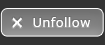
<style>
.page{position:relative;width:105px;height:45px;background:#333333}
.page>*{position:absolute;margin:0}
.t1{font:13px "Verdana";letter-spacing:0.025em;color:#ffffff}
</style>
<div class="page">
<p class="t1" style="left:33px;top:17px;width:58px;height:10px">Unfollow</p>
</div>
